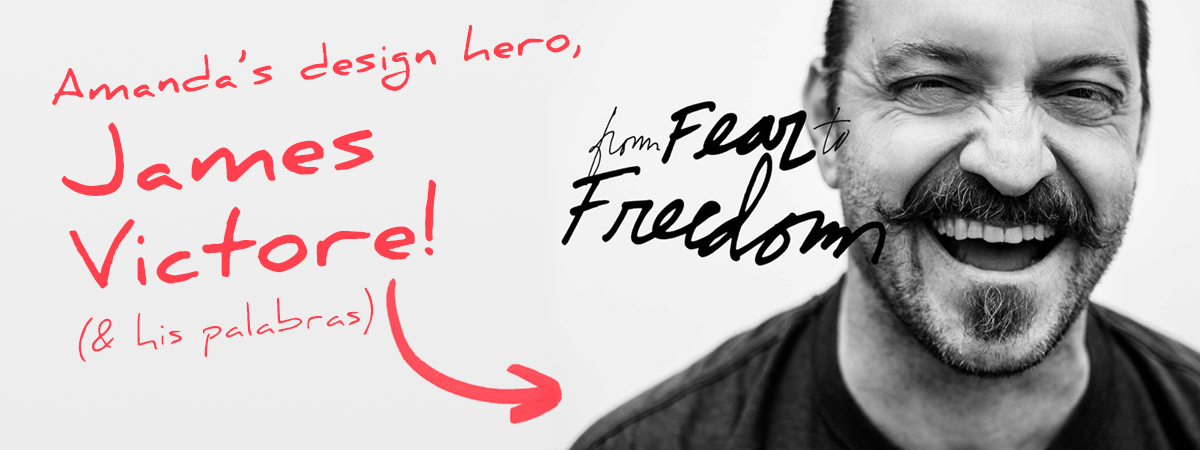
<style>
.page{position:relative;width:1200px;height:450px}
.page>*{position:absolute;margin:0}
.t1{font:42px/27px "DanielBold";letter-spacing:0.05em;color:#ff404e}
.t2{font:89px/94px "DanielBold";letter-spacing:0.05em;color:#ff404e}
.t3{font:87px/94px "DanielBold";letter-spacing:0.05em;color:#ff404e}
.t4{font:38px/61px "Daniel";letter-spacing:0.05em;color:#ff404e}
</style>
<div class="page">
<p class="t1" style="left:52px;top:24px;width:529px;height:338px;rotate:-6deg">Amanda’s design hero,<br><span class="t2">James <br></span><span class="t3">Victore!<br></span><span class="t4">(&amp; his palabras)</span></p>
</div>
